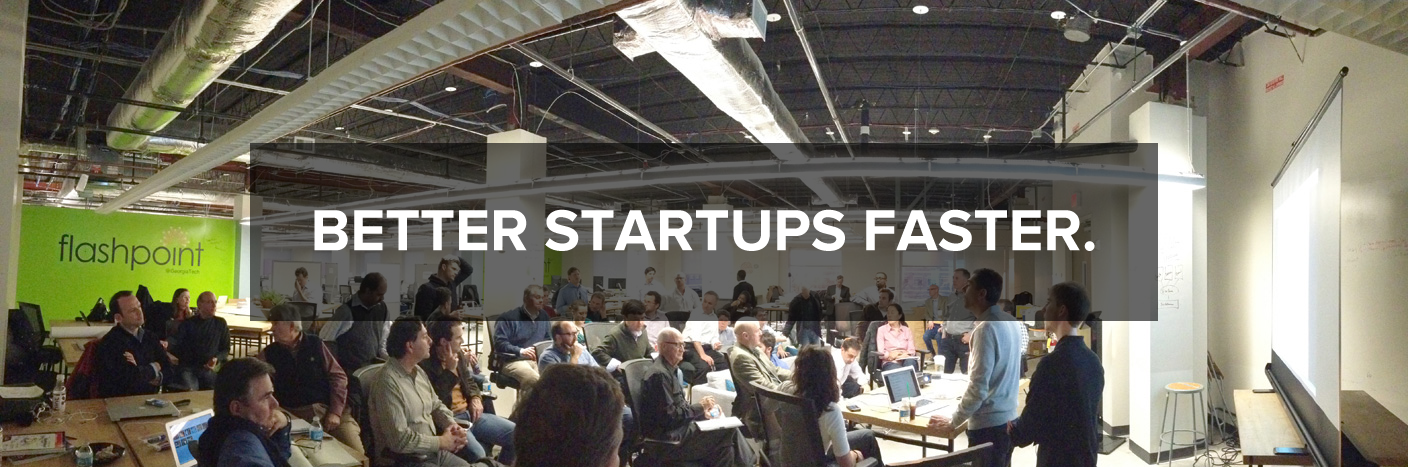
<style>
.page{position:relative;width:1408px;height:467px}
.page>*{position:absolute;margin:0}
.t1{font:60px "ProximaNova-Bold";color:#ffffff}
</style>
<div class="page">
<p class="t1" style="left:314px;top:209px;width:781px;height:42px">BETTER STARTUPS FASTER.</p>
</div>
